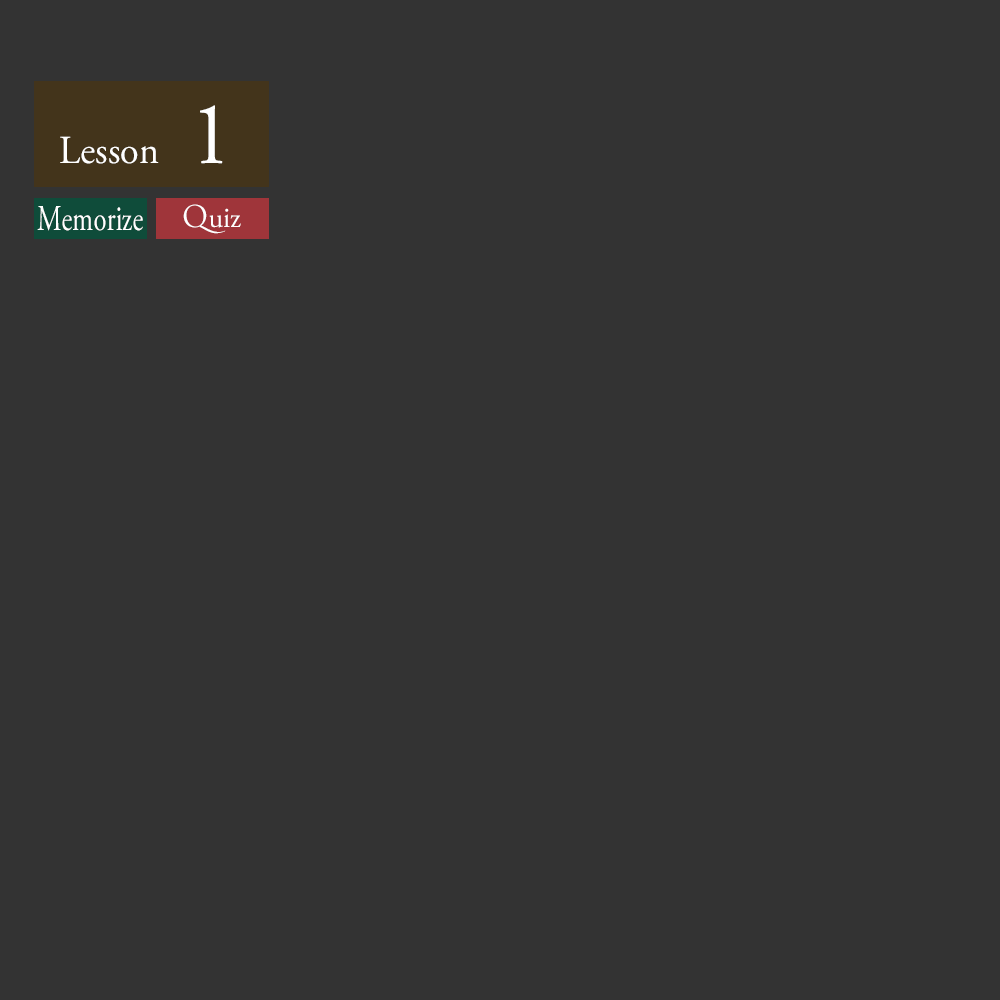
<style>
.page{position:relative;width:1000px;height:1000px;background:#333333}
.page>*{position:absolute;margin:0}
.t1{font:90.4px "AGaramondPro-Regular";color:#ffffff;scale:0.93 1}
.t2{font:39.7px "AGaramondPro-Regular";color:#ffffff;scale:0.97 1}
.t3{font:36.3px "AGaramondPro-Regular";color:#ffffff;scale:0.74 1}
.t4{font:29.3px "AGaramondPro-Regular";color:#ffffff}
.t5{font:29.3px "TrajanPro-Regular";color:#ffffff}
</style>
<div class="page">
<p class="t1" style="left:200px;top:105px;width:23px;height:59px">1</p>
<p class="t2" style="left:60px;top:136px;width:99px;height:28px">Lesson</p>
<p class="t3" style="left:37px;top:206px;width:106px;height:25px">Memorize</p>
<p class="t4" style="left:183px;top:204px;width:58px;height:30px"><span class="t5">Q</span>uiz</p>
</div>
